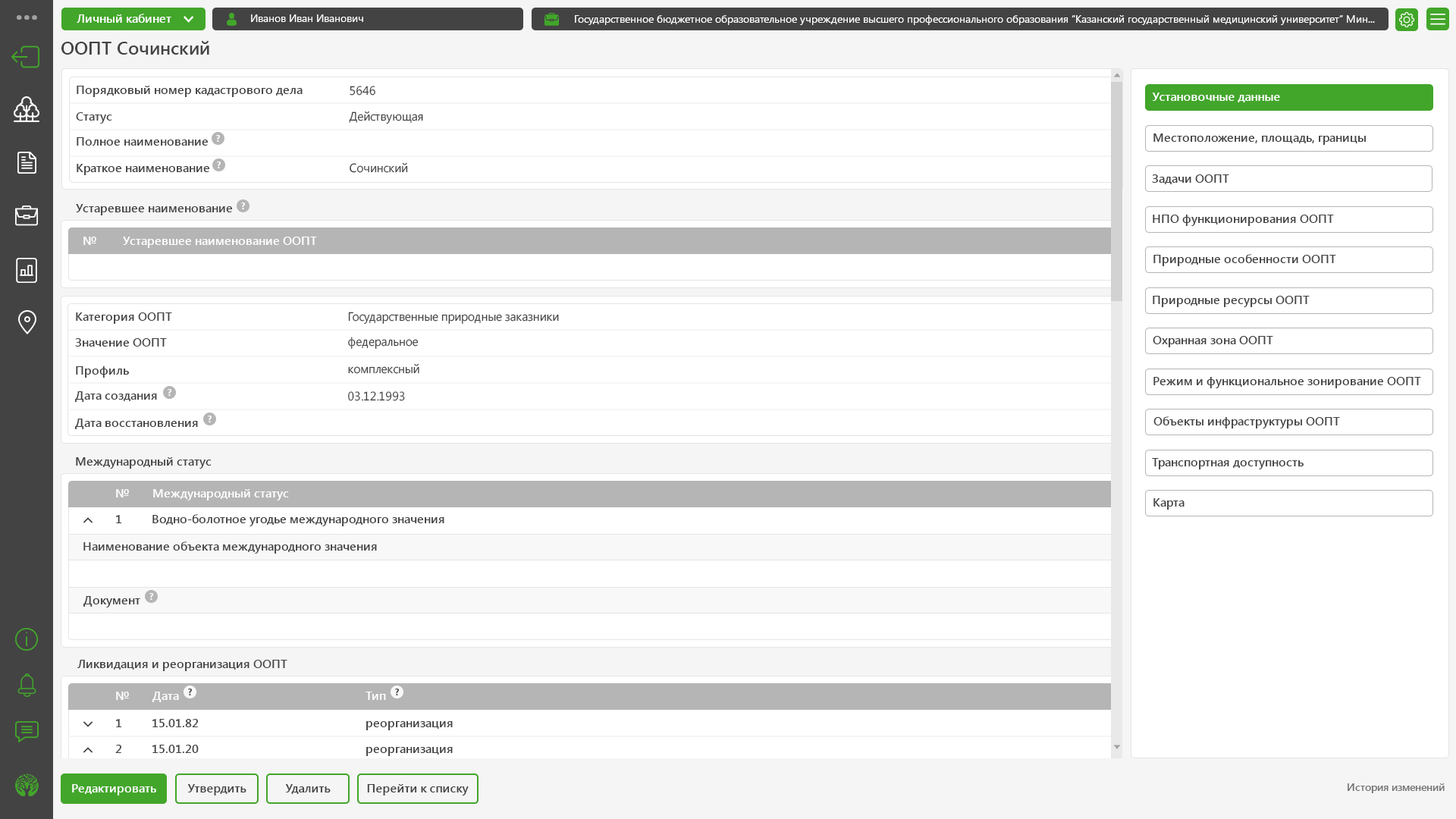
<style>
.page{position:relative;width:1456px;height:819px;background:#ffffff}
.page>*{position:absolute;margin:0}
.t1{font:12.1px "SegoeUI-SemiBold";color:#ffffff}
.t2{font:10.6px "SegoeUI";color:#ffffff}
.t3{font:18.2px "SegoeUI-SemiBold";color:#434343}
.t4{font:12.1px "SegoeUI-SemiBold";color:#434343}
.t5{font:12.1px "SegoeUI";color:#434343}
.t6{font:9.1px "SegoeUI-Bold";color:#ffffff}
.t7{font:9.1px "SegoeUI-Bold";color:#434343}
.t8{font:10.6px "SegoeUI-SemiBold";color:#737373}
</style>
<div class="page">
<p class="t1" style="left:77px;top:14px;width:94px;height:9px">Личный кабинет</p>
<p class="t2" style="left:251px;top:14px;width:112px;height:8px">Иванов Иван Иванович</p>
<p class="t2" style="left:575px;top:15px;width:800px;height:10px">Государственное бюджетное образовательное учреждение высшего профессионального образования “Казанский государственный медицинский университет” Мин...</p>
<p class="t3" style="left:61px;top:41px;width:148px;height:14px">ООПТ Сочинский<br>ООПТ Земля Франца-Иосифа</p>
<p class="t4" style="left:77px;top:86px;width:226px;height:11px">Порядковый номер кадастрового дела</p>
<p class="t5" style="left:350px;top:86px;width:25px;height:10px">5646</p>
<p class="t1" style="left:1152px;top:93px;width:128px;height:9px">Установочные данные</p>
<p class="t4" style="left:76px;top:112px;width:36px;height:12px">Статус</p>
<p class="t5" style="left:349px;top:111px;width:74px;height:13px">Действующая</p>
<p class="t4" style="left:77px;top:137px;width:132px;height:9px">Полное наименование</p>
<p class="t6" style="left:216px;top:135px;width:4px;height:7px">?</p>
<p class="t4" style="left:1153px;top:133px;width:213px;height:12px">Местоположение, площадь, границы</p>
<p class="t6" style="left:217px;top:162px;width:4px;height:6px">?</p>
<p class="t4" style="left:77px;top:164px;width:133px;height:11px">Краткое наименование</p>
<p class="t5" style="left:350px;top:162px;width:58px;height:11px">Сочинский</p>
<p class="t4" style="left:1152px;top:174px;width:77px;height:10px">Задачи ООПТ</p>
<p class="t4" style="left:76px;top:204px;width:157px;height:11px">Устаревшее наименование</p>
<p class="t6" style="left:241px;top:202px;width:4px;height:7px">?</p>
<p class="t4" style="left:1153px;top:215px;width:181px;height:11px">НПО функционирования ООПТ</p>
<p class="t1" style="left:83px;top:237px;width:13px;height:8px">№</p>
<p class="t1" style="left:123px;top:237px;width:194px;height:11px">Устаревшее наименование ООПТ</p>
<p class="t4" style="left:1153px;top:254px;width:183px;height:12px">Природные особенности ООПТ</p>
<p class="t4" style="left:1153px;top:296px;width:157px;height:11px">Природные ресурсы ООПТ</p>
<p class="t4" style="left:76px;top:312px;width:96px;height:12px">Категория ООПТ</p>
<p class="t5" style="left:348px;top:312px;width:211px;height:13px">Государственные природные заказники</p>
<p class="t4" style="left:75px;top:338px;width:92px;height:9px">Значение ООПТ</p>
<p class="t5" style="left:348px;top:337px;width:71px;height:13px">федеральное</p>
<p class="t4" style="left:1153px;top:336px;width:120px;height:11px">Охранная зона ООПТ</p>
<p class="t5" style="left:348px;top:363px;width:71px;height:11px">комплексный</p>
<p class="t4" style="left:76px;top:366px;width:53px;height:12px">Профиль</p>
<p class="t4" style="left:1153px;top:377px;width:268px;height:11px">Режим и функциональное зонирование ООПТ</p>
<p class="t6" style="left:168px;top:389px;width:3px;height:7px">?</p>
<p class="t4" style="left:75px;top:391px;width:82px;height:11px">Дата создания</p>
<p class="t5" style="left:348px;top:391px;width:57px;height:10px">03.12.1993</p>
<p class="t4" style="left:75px;top:419px;width:123px;height:10px">Дата восстановления</p>
<p class="t6" style="left:208px;top:416px;width:4px;height:6px">?</p>
<p class="t4" style="left:1153px;top:416px;width:187px;height:12px">Объекты инфраструктуры ООПТ</p>
<p class="t4" style="left:76px;top:457px;width:136px;height:12px">Международный статус</p>
<p class="t4" style="left:1152px;top:458px;width:152px;height:11px">Транспортная доступность</p>
<p class="t1" style="left:116px;top:489px;width:13px;height:8px">№</p>
<p class="t1" style="left:153px;top:489px;width:136px;height:11px">Международный статус</p>
<p class="t4" style="left:1153px;top:498px;width:32px;height:12px">Карта</p>
<p class="t4" style="left:116px;top:515px;width:6px;height:8px">1</p>
<p class="t4" style="left:152px;top:514px;width:292px;height:12px">Водно-болотное угодье международного значения</p>
<p class="t4" style="left:83px;top:541px;width:294px;height:13px">Наименование объекта международного значения</p>
<p class="t6" style="left:149px;top:593px;width:4px;height:7px">?</p>
<p class="t4" style="left:83px;top:596px;width:57px;height:11px">Документ</p>
<p class="t4" style="left:77px;top:660px;width:210px;height:11px">Ликвидация и реорганизация ООПТ</p>
<p class="t7" style="left:188px;top:689px;width:4px;height:6px">?</p>
<p class="t7" style="left:395px;top:689px;width:4px;height:6px">?</p>
<p class="t1" style="left:116px;top:692px;width:13px;height:8px">№</p>
<p class="t1" style="left:152px;top:692px;width:27px;height:10px">Дата</p>
<p class="t1" style="left:366px;top:692px;width:20px;height:8px">Тип</p>
<p class="t4" style="left:116px;top:719px;width:6px;height:8px">1</p>
<p class="t4" style="left:152px;top:719px;width:46px;height:8px">15.01.82</p>
<p class="t4" style="left:366px;top:721px;width:87px;height:9px">реорганизация</p>
<p class="t4" style="left:115px;top:745px;width:6px;height:8px">2</p>
<p class="t4" style="left:152px;top:745px;width:47px;height:8px">15.01.20</p>
<p class="t4" style="left:366px;top:747px;width:87px;height:9px">реорганизация</p>
<p class="t1" style="left:72px;top:784px;width:84px;height:11px">Редактировать</p>
<p class="t4" style="left:187px;top:784px;width:59px;height:11px">Утвердить</p>
<p class="t4" style="left:285px;top:784px;width:46px;height:10px">Удалить</p>
<p class="t4" style="left:367px;top:784px;width:102px;height:11px">Перейти к списку</p>
<p class="t8" style="left:1348px;top:783px;width:97px;height:10px">История изменений</p>
</div>
